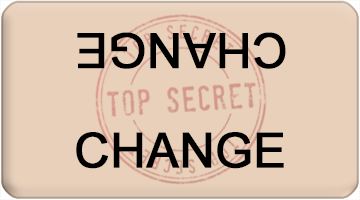
<style>
.page{position:relative;width:360px;height:200px;background:#e8d0bb}
.page>*{position:absolute;margin:0}
.t1{font:48px "ArialMT";color:#000000;font-weight:bold}
</style>
<div class="page">
<p class="t1" style="left:77px;top:32px;width:209px;height:37px;rotate:180deg">CHANGE</p>
<p class="t1" style="left:76px;top:132px;width:208px;height:37px">CHANGE</p>
</div>
